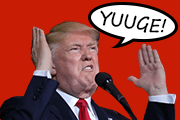
<style>
.page{position:relative;width:180px;height:120px;background:#c91c05}
.page>*{position:absolute;margin:0}
.t1{font:18.7px "SegoePrint";color:#000000;font-weight:bold;scale:0.87 1}
</style>
<div class="page">
<p class="t1" style="left:100px;top:10px;width:67px;height:23px;rotate:8deg">YUUGE!</p>
</div>
